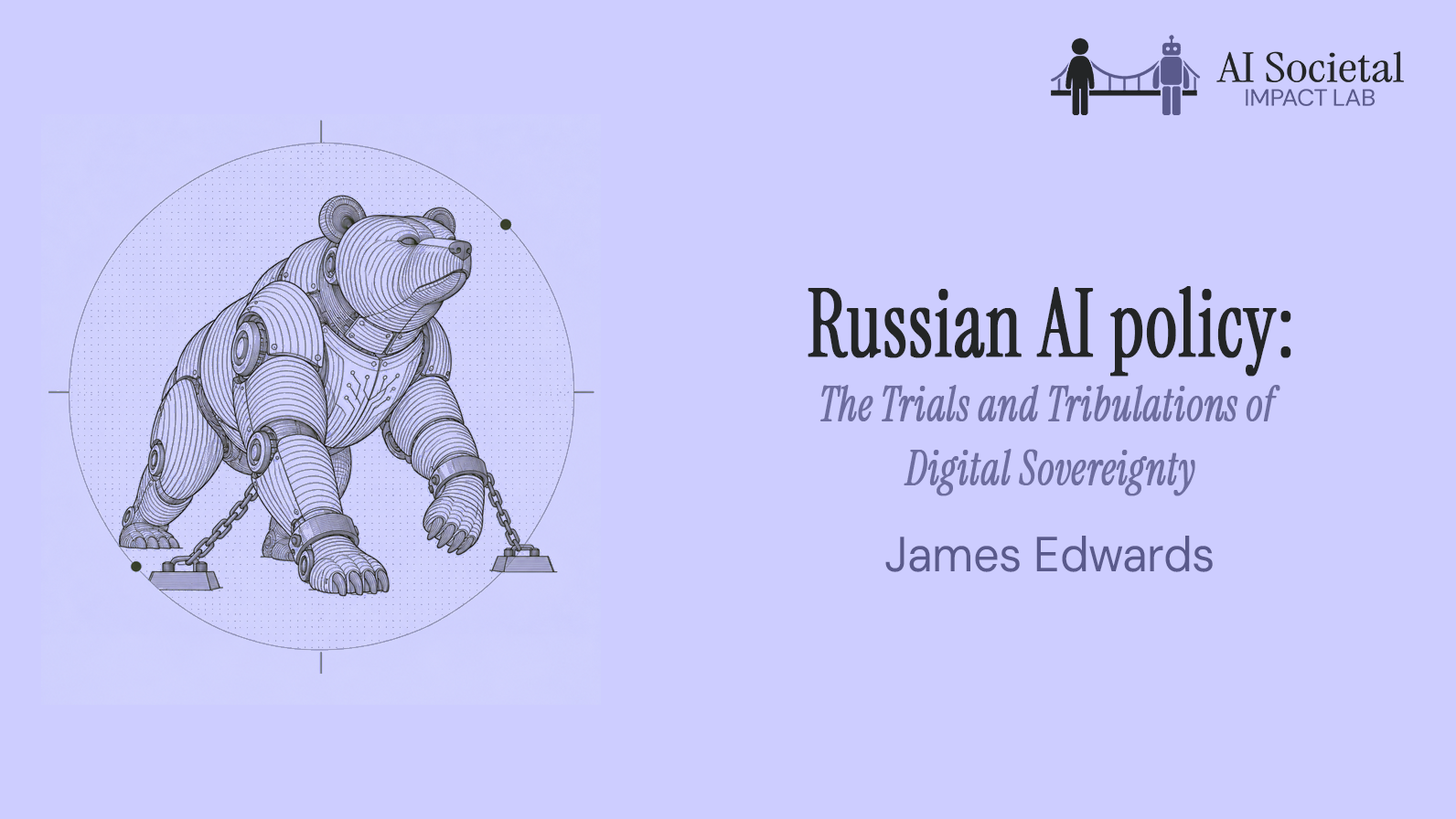
<style>
.page{position:relative;width:1456px;height:819px;background:#cdcdff}
.page>*{position:absolute;margin:0}
.t1{font:48.4px/64.2px "InstrumentSerif-Italic";letter-spacing:0.005em;color:#6d6d9f;font-weight:bold;scale:0.81 1}
.t2{font:92.9px/82.5px "InstrumentSerif-Regular";letter-spacing:0.005em;color:#232526;font-weight:bold;scale:0.81 1}
.t3{font:92.9px/73.4px "InstrumentSerif-Regular";letter-spacing:0.005em;color:#232526;font-weight:bold;scale:0.81 1}
.t4{font:49.4px "DMSans9pt-Regular";letter-spacing:-0.005em;color:#5a5a8c;scale:0.93 1}
</style>
<div class="page">
<p class="t1" style="left:807px;top:286px;width:484px;height:210px;text-align:center"><span class="t2"><br></span><span class="t3"><br>Russian AI policy:<br></span>The Trials and Tribulations of <br>Digital Sovereignty</p>
<p class="t4" style="left:885px;top:536px;width:327px;height:36px">James Edwards</p>
</div>
